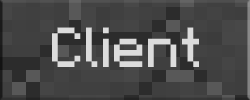
<style>
.page{position:relative;width:250px;height:100px}
.page>*{position:absolute;margin:0}
.t1{font:45px "Minecraftia";color:#dcdcdc}
</style>
<div class="page">
<p class="t1" style="left:52px;top:27px;width:147px;height:40px">Client</p>
</div>
